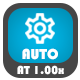
<style>
.page{position:relative;width:80px;height:80px;background:#464646}
.page>*{position:absolute;margin:0}
.t1{font:15px "Bauhaus93";color:#ffffff}
.t2{font:12px "Bauhaus93";color:#ffffff}
</style>
<div class="page">
<p class="t1" style="left:22px;top:48px;width:36px;height:12px">AUTO</p>
<p class="t2" style="left:17px;top:65px;width:47px;height:10px">AT 1.00x</p>
</div>
